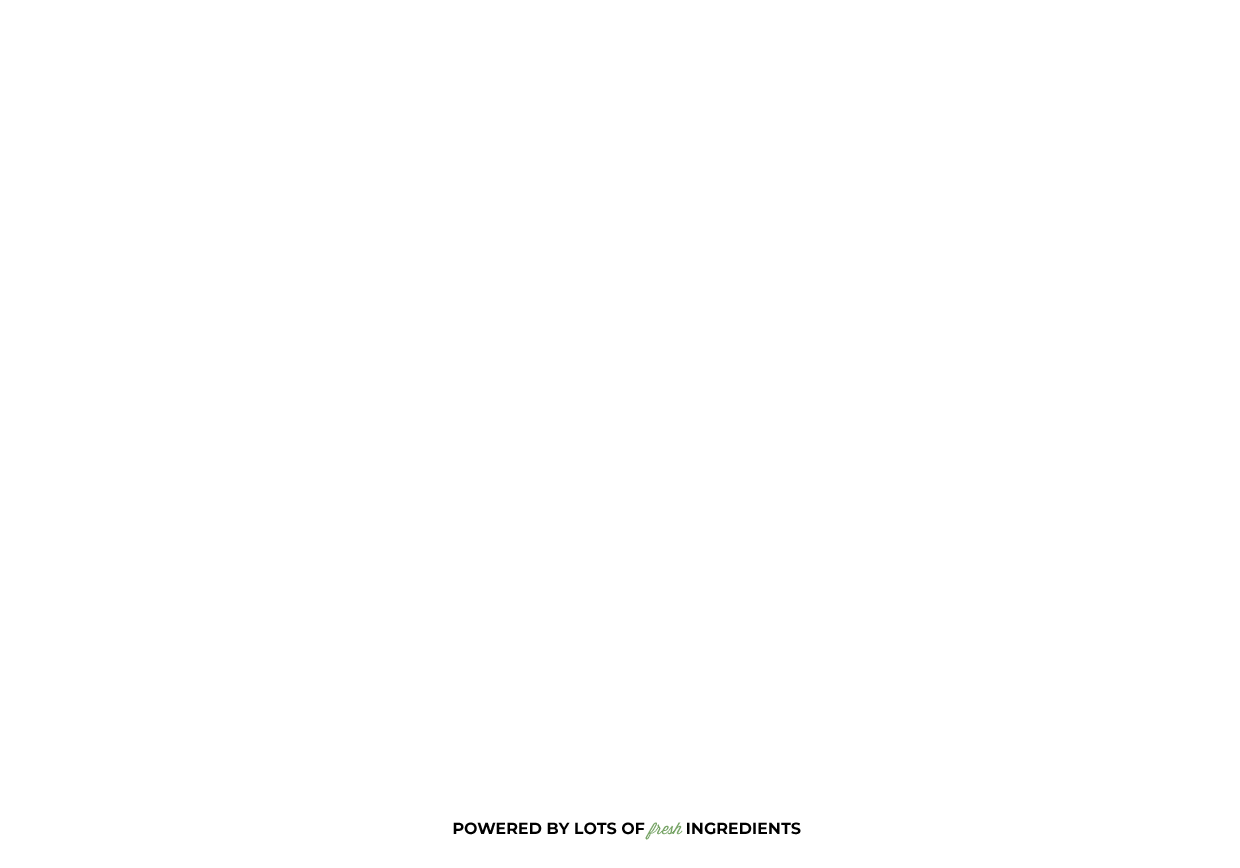
<style>
.page{position:relative;width:1240px;height:868px;background:#ffffff}
.page>*{position:absolute;margin:0}
.t1{font:16px "Montserrat-Bold";color:#000000;text-transform:uppercase}
.t2{font:16px "Wisdom-Script";color:#77a466}
</style>
<div class="page">
<p class="t1" style="left:453px;top:822px;width:348px;height:13px">Powered By Lots of         Ingredients</p>
<p class="t2" style="left:645px;top:822px;width:38px;height:18px">fresh</p>
</div>
